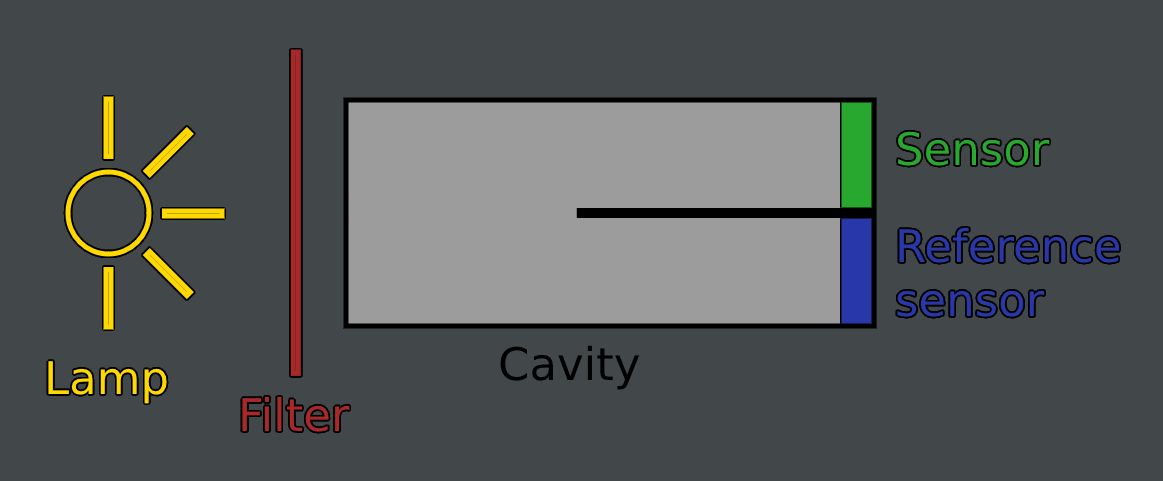
<style>
.page{position:relative;width:1163px;height:481px;background:#42474a}
.page>*{position:absolute;margin:0}
.t1{font:45px "DejaVuSans";color:#29a82f}
.t2{font:45px "DejaVuSans";color:#2938a8}
.t3{font:45px "DejaVuSans";color:#000000}
.t4{font:45px "DejaVuSans";color:#ffd800}
.t5{font:45px "DejaVuSans";color:#a82929}
</style>
<div class="page">
<p class="t1" style="left:897px;top:131px;width:153px;height:35px">Sensor</p>
<p class="t2" style="left:897px;top:227px;width:223px;height:90px">Reference<br>sensor</p>
<p class="t3" style="left:500px;top:345px;width:140px;height:45px">Cavity</p>
<p class="t4" style="left:48px;top:361px;width:119px;height:43px">Lamp</p>
<p class="t5" style="left:242px;top:396px;width:108px;height:36px">Filter</p>
</div>
